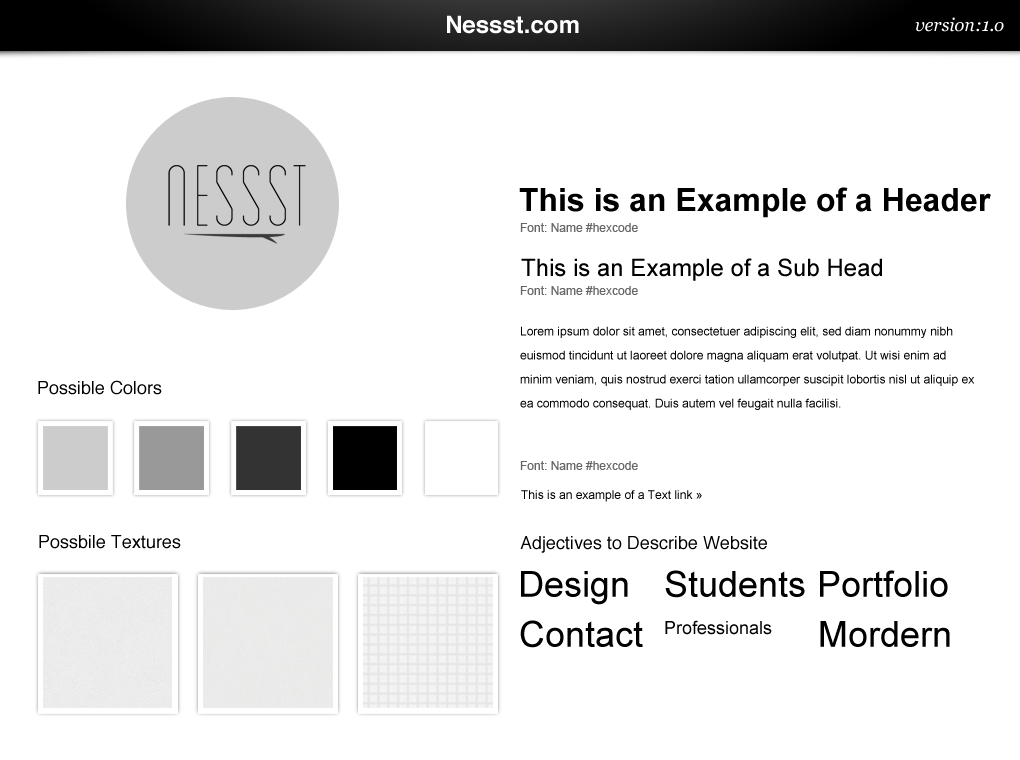
<style>
.page{position:relative;width:1020px;height:760px;background:#ffffff}
.page>*{position:absolute;margin:0}
.t1{font:24px "Helvetica-Bold";color:#ffffff}
.t2{font:18px "Georgia-Italic";color:#ffffff}
.t3{font:32px "Arial-BoldMT";color:#000000}
.t4{font:12px "ArialMT";color:#666666}
.t5{font:24px "ArialMT";color:#000000}
.t6{font:12px/24px "ArialMT";color:#000000}
.t7{font:18px "Helvetica";color:#000000}
.t8{font:12px "ArialMT";color:#000000}
.t9{font:36px "ArialMT";color:#000000}
.t10{font:18px "ArialMT";color:#000000}
</style>
<div class="page">
<p class="t1" style="left:447px;top:15px;width:132px;height:19px">Nessst.com</p>
<p class="t2" style="left:915px;top:17px;width:89px;height:15px">version:1.o</p>
<p class="t3" style="left:519px;top:187px;width:472px;height:31px">This is an Example of a Header</p>
<p class="t4" style="left:520px;top:223px;width:118px;height:9px">Font: Name #hexcode</p>
<p class="t5" style="left:521px;top:258px;width:361px;height:23px">This is an Example of a Sub Head</p>
<p class="t4" style="left:520px;top:286px;width:118px;height:9px">Font: Name #hexcode</p>
<p class="t6" style="left:520px;top:326px;width:455px;height:84px">Lorem ipsum dolor sit amet, consectetuer adipiscing elit, sed diam nonummy nibh euismod tincidunt ut laoreet dolore magna aliquam erat volutpat. Ut wisi enim ad minim veniam, quis nostrud exerci tation ullamcorper suscipit lobortis nisl ut aliquip ex ea commodo consequat. Duis autem vel feugait nulla facilisi.</p>
<p class="t7" style="left:38px;top:380px;width:124px;height:15px">Possible Colors</p>
<p class="t4" style="left:520px;top:461px;width:118px;height:9px">Font: Name #hexcode</p>
<p class="t8" style="left:521px;top:490px;width:181px;height:12px">This is an example of a Text link »</p>
<p class="t7" style="left:39px;top:535px;width:142px;height:14px">Possbile Textures</p>
<p class="t7" style="left:520px;top:536px;width:247px;height:17px">Adjectives to Describe Website</p>
<p class="t9" style="left:521px;top:571px;width:107px;height:34px">Design</p>
<p class="t9" style="left:665px;top:570px;width:140px;height:28px">Students</p>
<p class="t9" style="left:820px;top:570px;width:128px;height:27px">Portfolio</p>
<p class="t9" style="left:520px;top:620px;width:123px;height:28px">Contact</p>
<p class="t10" style="left:665px;top:620px;width:107px;height:15px">Professionals</p>
<p class="t9" style="left:820px;top:621px;width:130px;height:26px">Mordern</p>
</div>
